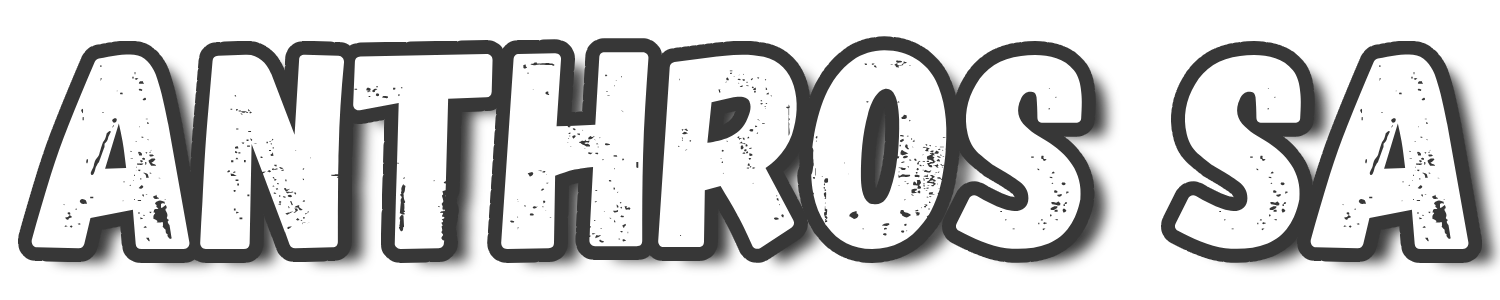
<style>
.page{position:relative;width:1500px;height:300px;background:#ffffff}
.page>*{position:absolute;margin:0}
.t1{font:281px "Gagalin-Regular";color:#ffffff}
</style>
<div class="page">
<p class="t1" style="left:31px;top:50px;width:1438px;height:199px">ANTHROS SA</p>
</div>
